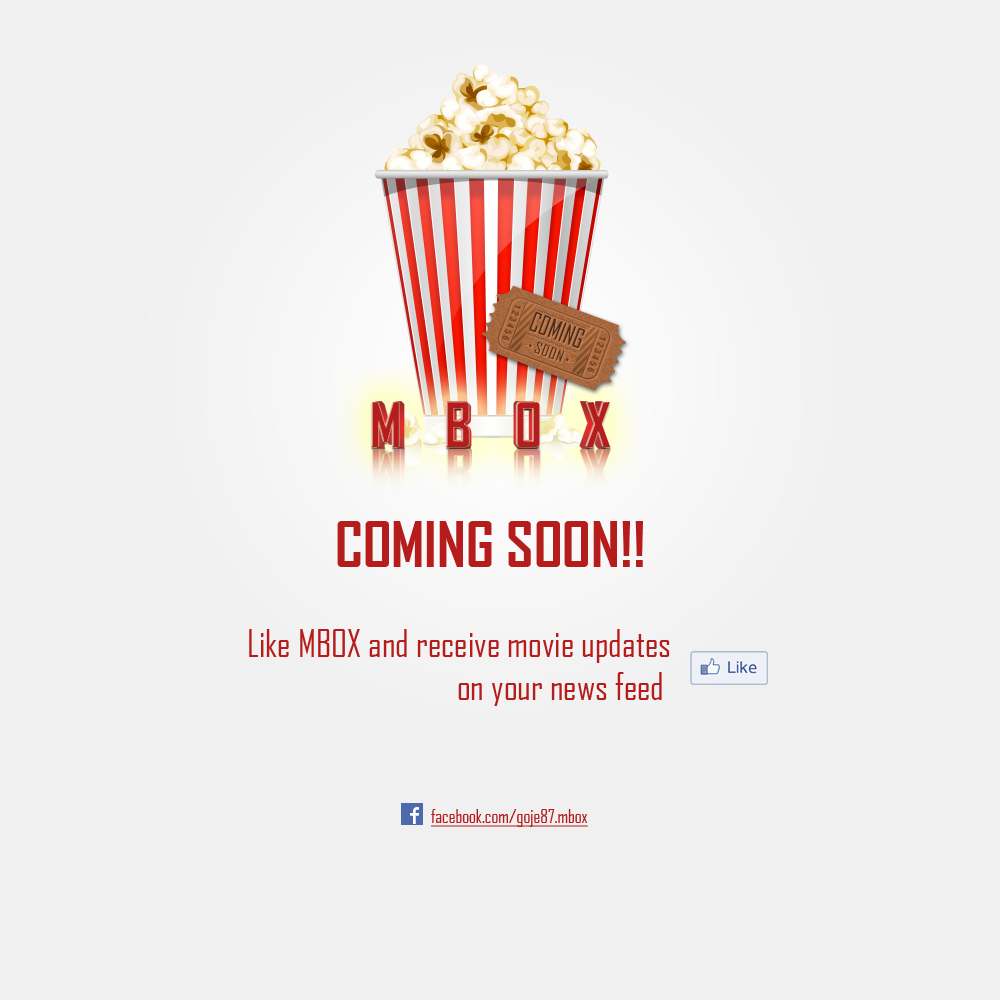
<style>
.page{position:relative;width:1000px;height:1000px;background:#f0f0f0}
.page>*{position:absolute;margin:0}
.t1{font:8.9px "Helvetica-Condensed-Bold";letter-spacing:0.25em;color:#6b3818;text-transform:uppercase}
.t2{font:26px "AgencyFB-Reg";letter-spacing:0.025em;color:#442b1c;text-transform:uppercase;scale:0.83 1}
.t3{font:14.9px "AgencyFB-Reg";letter-spacing:0.075em;color:#442b1c;text-transform:uppercase}
.t4{font:60px "AgencyFB-Bold";color:#b51c1c}
.t5{font:36px "AgencyFB-Reg";color:#b51c1c}
.t6{font:18px "AgencyFB-Reg";color:#b51c1c;text-decoration:underline}
</style>
<div class="page">
<p class="t1" style="left:502px;top:304px;width:20px;height:38px;rotate:111deg">123456</p>
<p class="t2" style="left:529px;top:311px;width:56px;height:37px;rotate:21deg">COMING</p>
<p class="t3" style="left:534px;top:341px;width:31px;height:21px;rotate:21deg">SOON</p>
<p class="t1" style="left:586px;top:336px;width:20px;height:37px;rotate:111deg">123456</p>
<p class="t4" style="left:337px;top:521px;width:306px;height:46px">COMING SOON!!</p>
<p class="t5" style="left:249px;top:629px;width:421px;height:77px;text-align:right">Like MBOX and receive movie updates<br>on your news feed</p>
<p class="t6" style="left:431px;top:809px;width:157px;height:18px">facebook.com/goje87.mbox</p>
</div>
